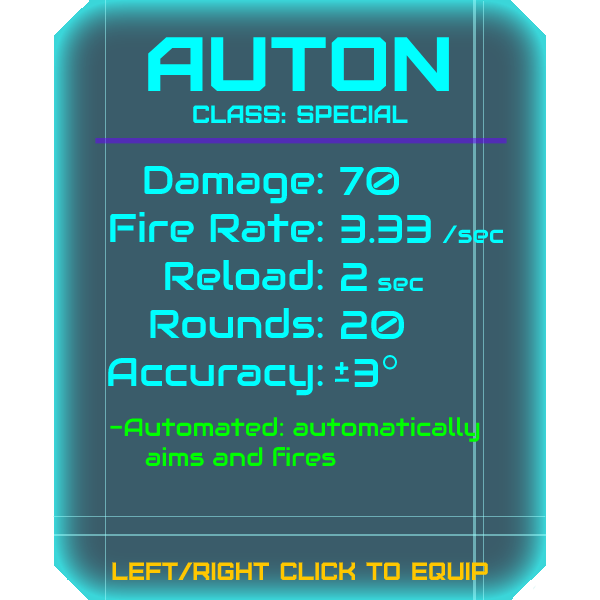
<style>
.page{position:relative;width:600px;height:600px;background:#3a5c6a}
.page>*{position:absolute;margin:0}
.t1{font:76.8px "Furore";color:#00ffff;scale:1.13 1}
.t2{font:25px "Furore";color:#00ffff}
.t3{font:40px "Audiowide-Regular";color:#00ffff}
.t4{font:25px "Audiowide-Regular";color:#00ffff}
.t5{font:25px "Audiowide-Regular";color:#00ff00}
.t6{font:25px "Furore";color:#ffc700}
</style>
<div class="page">
<p class="t1" style="left:148px;top:37px;width:301px;height:54px">AUton</p>
<p class="t2" style="left:193px;top:105px;width:215px;height:18px">Class: Special</p>
<p class="t3" style="left:108px;top:165px;width:215px;height:231px;text-align:right">Damage:<br>Fire Rate:<br>Reload:<br>Rounds:<br>Accuracy:</p>
<p class="t3" style="left:340px;top:166px;width:164px;height:221px">70<br>3.33 <span class="t4">/sec<br></span>2 <span class="t4">sec<br></span>20<br> 3</p>
<p class="t5" style="left:110px;top:417px;width:370px;height:49px">-Automated: automatically<br> aims and f</p>
<p class="t5" style="left:286px;top:447px;width:50px;height:19px">ires</p>
<p class="t6" style="left:112px;top:562px;width:376px;height:18px">left/right click to equip</p>
</div>
